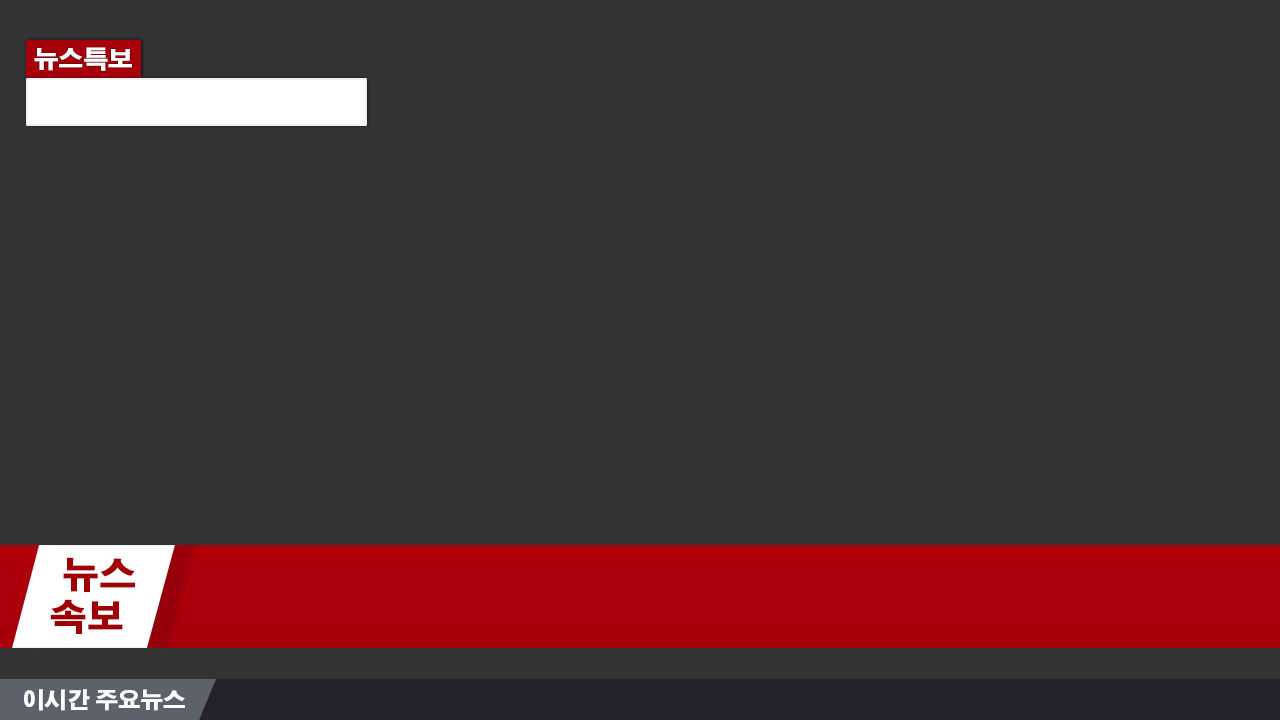
<style>
.page{position:relative;width:1280px;height:720px;background:#333333}
.page>*{position:absolute;margin:0}
.t1{font:24px "AdobeGothicStd-Bold";color:#ffffff;font-weight:bold}
.t2{font:36px "AdobeGothicStd-Bold";color:#a00003;font-weight:bold}
.t3{font:22px "AdobeGothicStd-Bold";color:#ffffff;font-weight:bold}
</style>
<div class="page">
<p class="t1" style="left:34px;top:47px;width:98px;height:24px">뉴스특보</p>
<p class="t2" style="left:63px;top:557px;width:72px;height:35px">뉴스</p>
<p class="t2" style="left:50px;top:599px;width:73px;height:35px">속보</p>
<p class="t3" style="left:24px;top:689px;width:161px;height:22px">이시간 주요뉴스</p>
</div>
